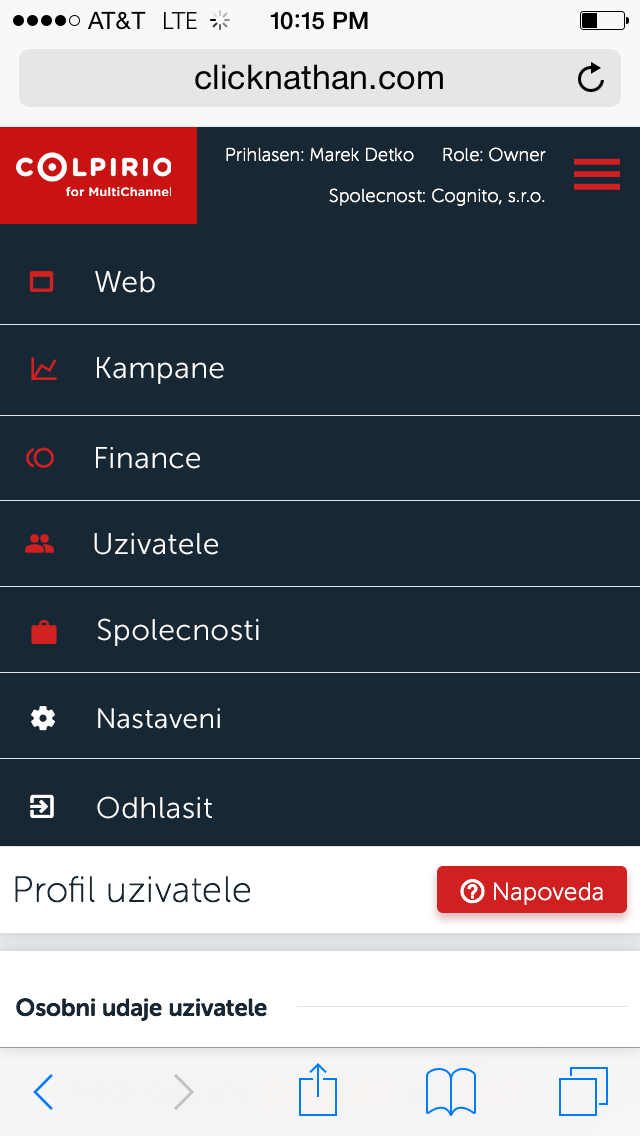
<style>
.page{position:relative;width:640px;height:1136px;background:#172734}
.page>*{position:absolute;margin:0}
.t1{font:18px "MuseoSansRounded-100";letter-spacing:0.025em;color:#ffffff}
.t2{font:30px "MuseoSansRounded-300";letter-spacing:0.025em;color:#ffffff}
.t3{font:28px "MuseoSansRounded-300";letter-spacing:0.025em;color:#ffffff}
.t4{font:36px "MuseoSansRounded-100";letter-spacing:0.025em;color:#172734}
.t5{font:24px "MuseoSansRounded-100";letter-spacing:0.025em;color:#ffffff}
.t6{font:24px "MuseoSansRounded-700";color:#172734}
</style>
<div class="page">
<p class="t1" style="left:226px;top:147px;width:188px;height:15px">Prihlasen: Marek Detko</p>
<p class="t1" style="left:443px;top:147px;width:103px;height:15px">Role: Owner</p>
<p class="t1" style="left:329px;top:188px;width:216px;height:18px">Spolecnost: Cognito, s.r.o.</p>
<p class="t2" style="left:95px;top:271px;width:60px;height:22px">Web</p>
<p class="t2" style="left:97px;top:357px;width:127px;height:27px">Kampane</p>
<p class="t2" style="left:96px;top:447px;width:104px;height:22px">Finance</p>
<p class="t2" style="left:94px;top:533px;width:124px;height:22px">Uzivatele</p>
<p class="t2" style="left:98px;top:618px;width:161px;height:28px">Spolecnosti</p>
<p class="t3" style="left:98px;top:708px;width:122px;height:21px">Nastaveni</p>
<p class="t2" style="left:97px;top:796px;width:115px;height:23px">Odhlasit</p>
<p class="t4" style="left:15px;top:876px;width:236px;height:27px">Profil uzivatele</p>
<p class="t5" style="left:494px;top:882px;width:109px;height:23px">Napoveda</p>
<p class="t6" style="left:16px;top:998px;width:251px;height:23px">Osobni udaje uzivatele</p>
</div>
